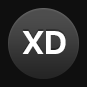
<style>
.page{position:relative;width:87px;height:87px;background:#0f0f0f}
.page>*{position:absolute;margin:0}
.t1{font:32.5px "SFUIDisplay-Bold";color:#ffffff}
</style>
<div class="page">
<p class="t1" style="left:22px;top:31px;width:44px;height:23px">XD</p>
</div>
